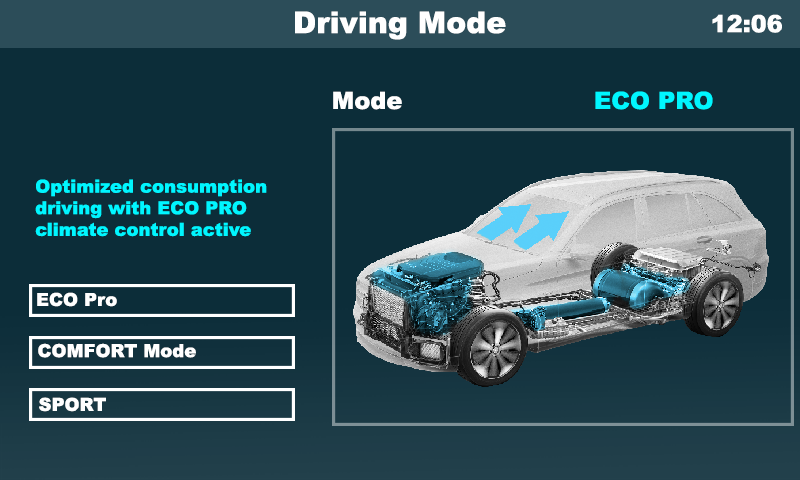
<style>
.page{position:relative;width:800px;height:480px;background:#0c2d39}
.page>*{position:absolute;margin:0}
.t1{font:30px "Arial-Black";color:#ffffff}
.t2{font:24px "Arial-Black";color:#ffffff}
.t3{font:24px "Arial-Black";color:#00f6ff}
.t4{font:18px "Arial-Black";color:#00f6ff}
.t5{font:18px "Arial-Black";color:#ffffff}
</style>
<div class="page">
<p class="t1" style="left:295px;top:11px;width:211px;height:29px">Driving Mode</p>
<p class="t2" style="left:712px;top:14px;width:70px;height:19px">12:06</p>
<p class="t2" style="left:333px;top:91px;width:69px;height:19px">Mode</p>
<p class="t3" style="left:595px;top:91px;width:118px;height:19px">ECO PRO</p>
<p class="t4" style="left:35px;top:179px;width:232px;height:58px">Optimized consumption<br>driving with ECO PRO<br>climate control active</p>
<p class="t5" style="left:37px;top:292px;width:80px;height:15px">ECO Pro</p>
<p class="t5" style="left:38px;top:343px;width:158px;height:15px">COMFORT Mode</p>
<p class="t5" style="left:39px;top:397px;width:67px;height:15px">SPORT</p>
</div>
